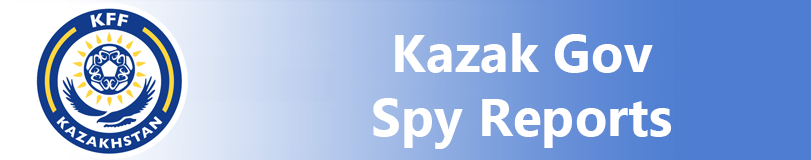
<style>
.page{position:relative;width:811px;height:160px}
.page>*{position:absolute;margin:0}
.t1{font:53.3px "MyanmarText-Bold";color:#ffffff}
</style>
<div class="page">
<p class="t1" style="left:373px;top:33px;width:298px;height:116px;text-align:center">Kazak Gov<br>Spy Reports</p>
</div>
